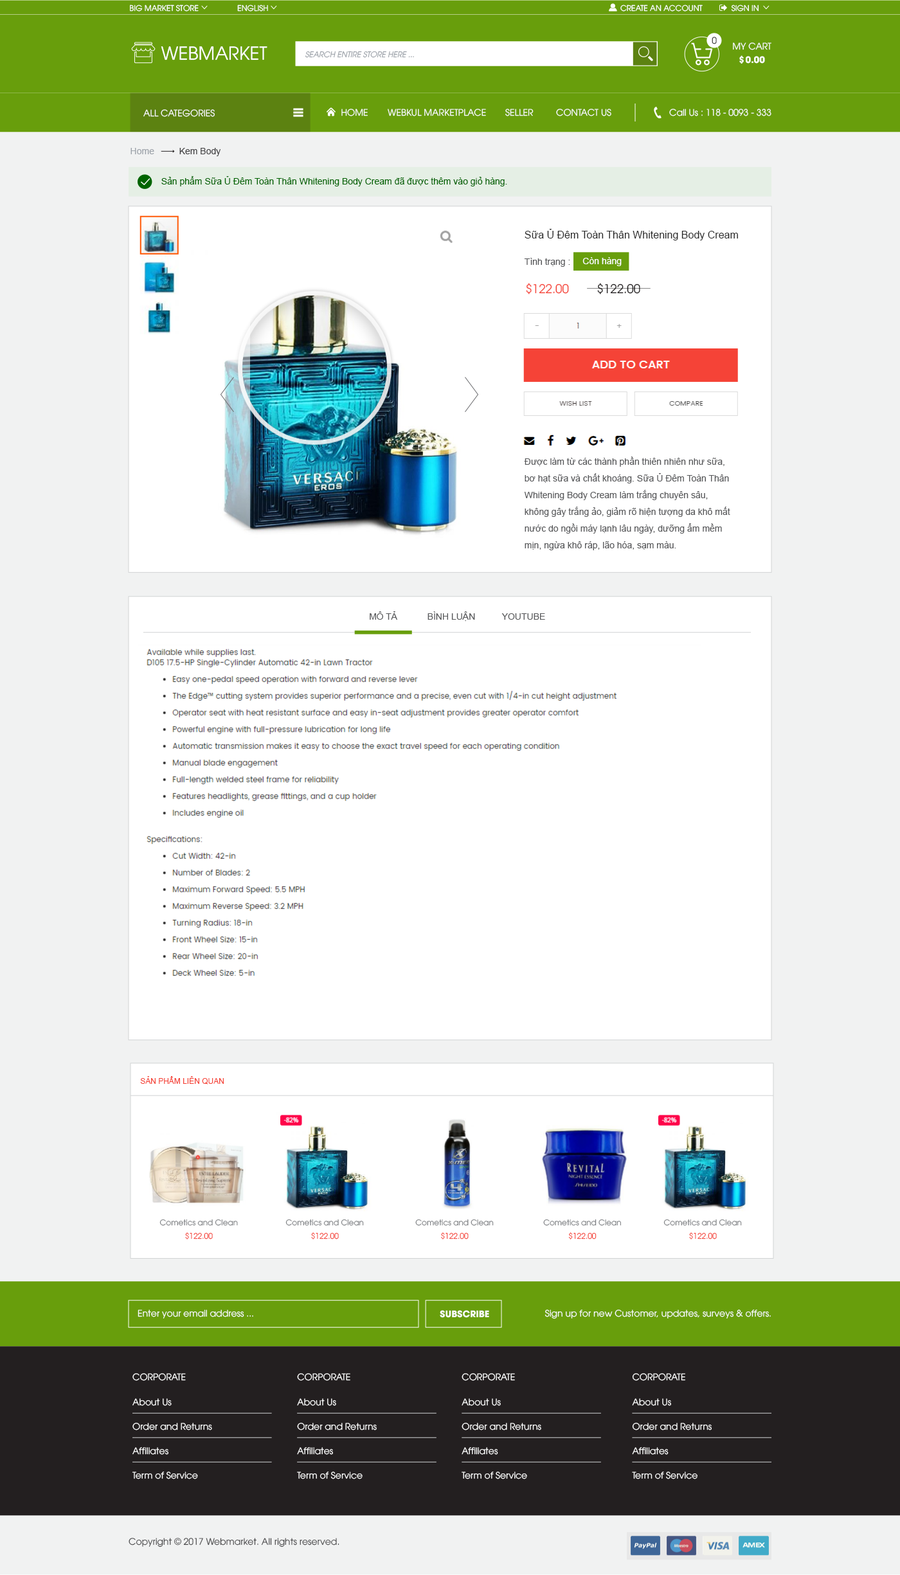
<style>
.page{position:relative;width:900px;height:1575px;background:#ffffff}
.page>*{position:absolute;margin:0}
.t1{font:7.7px "UTM-Avo";color:#ffffff}
.t2{font:9px "UTM-Avo"}
.t3{font:18px "UTM-Avo";color:#ffffff}
.t4{font:7.7px "UTMAvo-Italic";color:#9da3aa}
.t5{font:9px "UTM-Avo";color:#ffffff}
.t6{font:9px "UTMAvoBold";color:#ffffff}
.t7{font:9px "ArialMT";color:#9da3aa}
.t8{font:9px "ArialMT";color:#414042}
.t9{font:9px "ArialMT";color:#006400}
.t10{font:10.3px "ArialMT";color:#282828}
.t11{font:9px "ArialMT";color:#58595b}
.t12{font:9px "ArialMT";color:#ffffff}
.t13{font:12px "UTM-Avo";color:#f54337}
.t14{font:12px "UTM-Avo";color:#231f20}
.t15{font:9px/16.7px "ArialMT";color:#58595b}
.t16{font:7.7px "ArialMT";color:#f54337}
.t17{font:7.7px "UTM-Avo";color:#808285}
.t18{font:7.7px "UTM-Avo";color:#f54337}
.t19{font:9px "UTM-Avo";color:#414042}
</style>
<div class="page">
<p class="t1" style="left:130px;top:4px;width:69px;height:8px">BIG MARKET STORE</p>
<p class="t1" style="left:237px;top:4px;width:31px;height:8px">ENGLISH</p>
<p class="t1" style="left:620px;top:4px;width:83px;height:8px">CREATE AN ACCOUNT</p>
<p class="t1" style="left:731px;top:4px;width:28px;height:8px">SIGN IN</p>
<p class="t2" style="left:712px;top:37px;width:5px;height:7px">0</p>
<p class="t3" style="left:161px;top:46px;width:106px;height:14px">WEBMARKET</p>
<p class="t4" style="left:305px;top:51px;width:109px;height:7px">SEARCH ENTIRE STORE HERE ...</p>
<p class="t5" style="left:733px;top:42px;width:38px;height:8px">MY CART</p>
<p class="t6" style="left:739px;top:55px;width:26px;height:9px">$ 0.00</p>
<p class="t5" style="left:143px;top:109px;width:72px;height:8px">ALL CATEGORIES</p>
<p class="t5" style="left:341px;top:109px;width:27px;height:7px">HOME</p>
<p class="t5" style="left:388px;top:109px;width:98px;height:7px">WEBKUL MARKETPLACE</p>
<p class="t5" style="left:505px;top:109px;width:29px;height:7px">SELLER</p>
<p class="t5" style="left:556px;top:109px;width:55px;height:7px">CONTACT US</p>
<p class="t5" style="left:669px;top:109px;width:102px;height:7px">Call Us : 118 - 0093 - 333</p>
<p class="t7" style="left:130px;top:148px;width:24px;height:6px">Home</p>
<p class="t8" style="left:179px;top:148px;width:42px;height:8px">Kem Body</p>
<p class="t9" style="left:161px;top:176px;width:346px;height:10px">Sản phẩm Sữa Ủ Đêm Toàn Thân Whitening Body Cream đã được thêm vào giỏ hàng.</p>
<p class="t10" style="left:525px;top:229px;width:213px;height:11px">Sữa Ủ Đêm Toàn Thân Whitening Body Cream</p>
<p class="t11" style="left:524px;top:258px;width:46px;height:9px">Tình trạng :</p>
<p class="t12" style="left:582px;top:257px;width:40px;height:9px">Còn hàng</p>
<p class="t13" style="left:526px;top:283px;width:43px;height:11px">$122.00</p>
<p class="t14" style="left:597px;top:283px;width:43px;height:11px">$122.00</p>
<p class="t15" style="left:524px;top:456px;width:206px;height:94px">Được làm từ các thành phần thiên nhiên như sữa, bơ hạt sữa và chất khoáng. Sữa Ủ Đêm Toàn Thân Whitening Body Cream làm trắng chuyên sâu, không gây trắng ảo, giảm rõ hiện tượng da khô mất nước do ngồi máy lạnh lâu ngày, dưỡng ẩm mềm mịn, ngừa khô ráp, lão hóa, sạm màu.</p>
<p class="t11" style="left:370px;top:611px;width:28px;height:9px">MÔ TẢ</p>
<p class="t11" style="left:428px;top:611px;width:47px;height:10px">BÌNH LUẬN</p>
<p class="t11" style="left:501px;top:613px;width:44px;height:7px">YOUTUBE</p>
<p class="t16" style="left:140px;top:1076px;width:84px;height:8px">SẢN PHẨM LIÊN QUAN</p>
<p class="t17" style="left:159px;top:1219px;width:79px;height:7px">Cometics and Clean</p>
<p class="t17" style="left:285px;top:1219px;width:79px;height:7px">Cometics and Clean</p>
<p class="t17" style="left:415px;top:1219px;width:79px;height:7px">Cometics and Clean</p>
<p class="t17" style="left:543px;top:1219px;width:78px;height:7px">Cometics and Clean</p>
<p class="t17" style="left:663px;top:1219px;width:79px;height:7px">Cometics and Clean</p>
<p class="t18" style="left:185px;top:1232px;width:28px;height:7px">$122.00</p>
<p class="t18" style="left:311px;top:1232px;width:28px;height:7px">$122.00</p>
<p class="t18" style="left:441px;top:1232px;width:28px;height:7px">$122.00</p>
<p class="t18" style="left:568px;top:1232px;width:29px;height:7px">$122.00</p>
<p class="t18" style="left:689px;top:1232px;width:28px;height:7px">$122.00</p>
<p class="t5" style="left:138px;top:1310px;width:115px;height:8px">Enter your email address ...</p>
<p class="t6" style="left:440px;top:1310px;width:49px;height:8px">SUBSCRIBE</p>
<p class="t5" style="left:544px;top:1310px;width:227px;height:9px">Sign up for new Customer, updates, surveys &amp; offers.</p>
<p class="t5" style="left:132px;top:1373px;width:54px;height:8px">CORPORATE</p>
<p class="t5" style="left:297px;top:1373px;width:53px;height:8px">CORPORATE</p>
<p class="t5" style="left:462px;top:1373px;width:53px;height:8px">CORPORATE</p>
<p class="t5" style="left:632px;top:1373px;width:53px;height:8px">CORPORATE</p>
<p class="t5" style="left:132px;top:1398px;width:40px;height:8px">About Us</p>
<p class="t5" style="left:297px;top:1398px;width:39px;height:8px">About Us</p>
<p class="t5" style="left:462px;top:1398px;width:39px;height:8px">About Us</p>
<p class="t5" style="left:632px;top:1398px;width:39px;height:8px">About Us</p>
<p class="t5" style="left:132px;top:1423px;width:80px;height:7px">Order and Returns</p>
<p class="t5" style="left:297px;top:1423px;width:80px;height:7px">Order and Returns</p>
<p class="t5" style="left:462px;top:1423px;width:79px;height:7px">Order and Returns</p>
<p class="t5" style="left:632px;top:1423px;width:80px;height:7px">Order and Returns</p>
<p class="t5" style="left:132px;top:1447px;width:36px;height:8px">Affiliates</p>
<p class="t5" style="left:297px;top:1447px;width:36px;height:8px">Affiliates</p>
<p class="t5" style="left:462px;top:1447px;width:36px;height:8px">Affiliates</p>
<p class="t5" style="left:632px;top:1447px;width:37px;height:8px">Affiliates</p>
<p class="t5" style="left:132px;top:1472px;width:66px;height:7px">Term of Service</p>
<p class="t5" style="left:297px;top:1472px;width:66px;height:7px">Term of Service</p>
<p class="t5" style="left:462px;top:1472px;width:65px;height:7px">Term of Service</p>
<p class="t5" style="left:632px;top:1472px;width:66px;height:7px">Term of Service</p>
<p class="t19" style="left:129px;top:1538px;width:210px;height:9px">Copyright © 2017 Webmarket. All rights reserved.</p>
</div>
